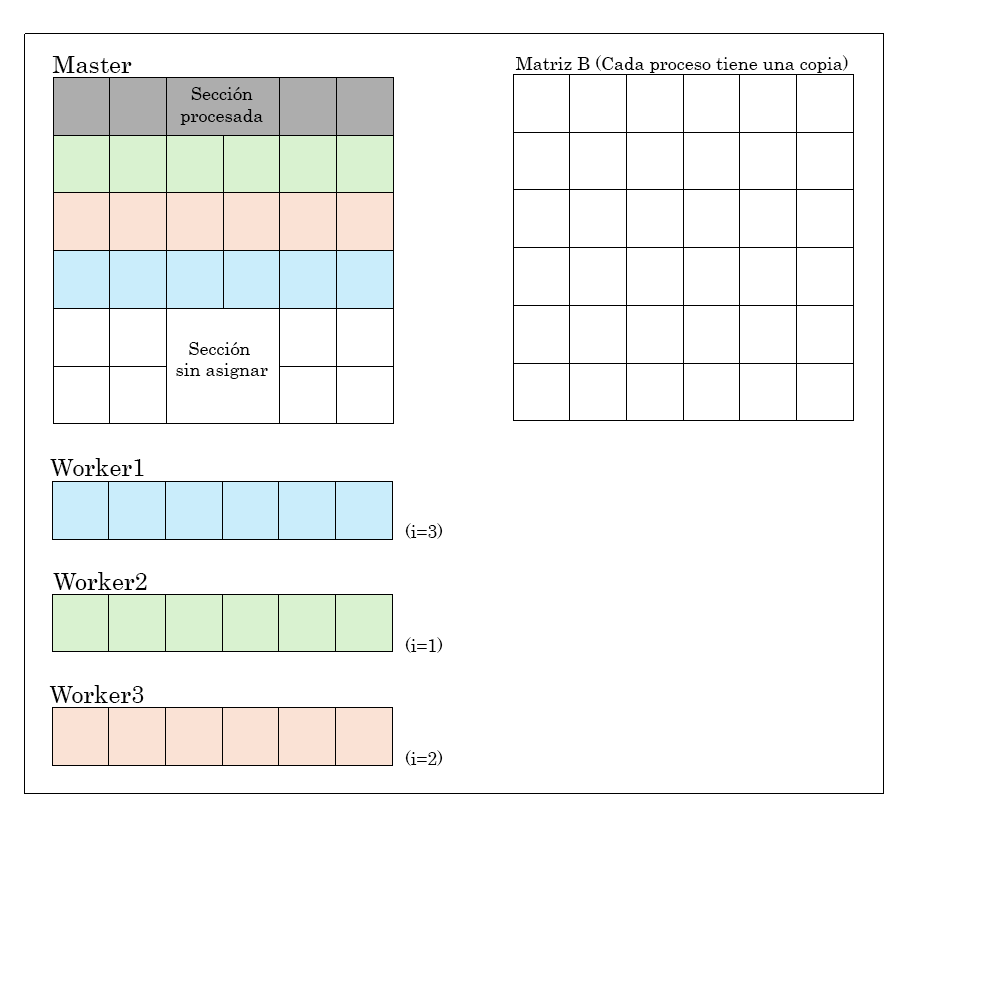
<style>
.page{position:relative;width:1000px;height:1000px;background:#ffffff}
.page>*{position:absolute;margin:0}
.t1{font:24px "Century";color:#000000}
.t2{font:18px "Century";color:#000000}
</style>
<div class="page">
<p class="t1" style="left:52px;top:56px;width:80px;height:17px">Master</p>
<p class="t2" style="left:515px;top:55px;width:333px;height:18px">Matriz B (Cada proceso tiene una copia)</p>
<p class="t2" style="left:180px;top:87px;width:83px;height:38px;text-align:center">Sección<br>procesada</p>
<p class="t2" style="left:176px;top:342px;width:92px;height:37px;text-align:center">Sección <br>sin asignar</p>
<p class="t1" style="left:50px;top:458px;width:94px;height:18px">Worker1</p>
<p class="t2" style="left:405px;top:523px;width:38px;height:16px">(i=3)</p>
<p class="t1" style="left:53px;top:572px;width:94px;height:18px">Worker2</p>
<p class="t2" style="left:405px;top:637px;width:38px;height:16px">(i=1)</p>
<p class="t1" style="left:49px;top:685px;width:95px;height:18px">Worker3</p>
<p class="t2" style="left:405px;top:750px;width:38px;height:16px">(i=2)</p>
</div>
